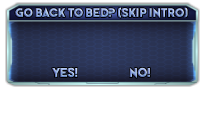
<style>
.page{position:relative;width:205px;height:130px;background:#ffffff}
.page>*{position:absolute;margin:0}
.t1{font:12.5px "PerfectlyTogether"}
.t2{font:13px "PerfectlyTogether"}
</style>
<div class="page">
<p class="t1" style="left:15px;top:7px;width:173px;height:12px">Go back to Bed? (Skip Intro)</p>
<p class="t2" style="left:52px;top:67px;width:26px;height:11px">Yes!</p>
<p class="t2" style="left:129px;top:67px;width:21px;height:12px">No!</p>
</div>
